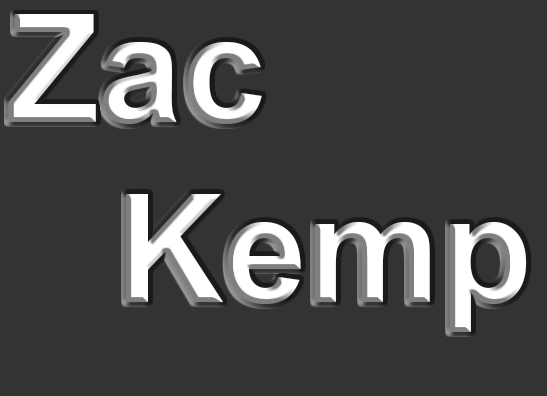
<style>
.page{position:relative;width:547px;height:396px;background:#333333}
.page>*{position:absolute;margin:0}
.t1{font:150px "Arial-BoldMT";color:#ffffff}
</style>
<div class="page">
<p class="t1" style="left:8px;top:14px;width:519px;height:318px">Zac<br>   Kemp</p>
</div>
